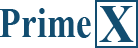
<style>
.page{position:relative;width:138px;height:48px;background:#ffffff}
.page>*{position:absolute;margin:0}
.t1{font:54.2px "TimesNewRomanPS-BoldMT";color:#124d70;scale:0.89 1}
.t2{font:41.7px "TimesNewRomanPS-BoldMT";color:#124d70;scale:0.85 1}
</style>
<div class="page">
<p class="t1" style="left:99px;top:6px;width:35px;height:36px">X</p>
<p class="t2" style="left:0px;top:8px;width:91px;height:30px">Prime</p>
</div>
